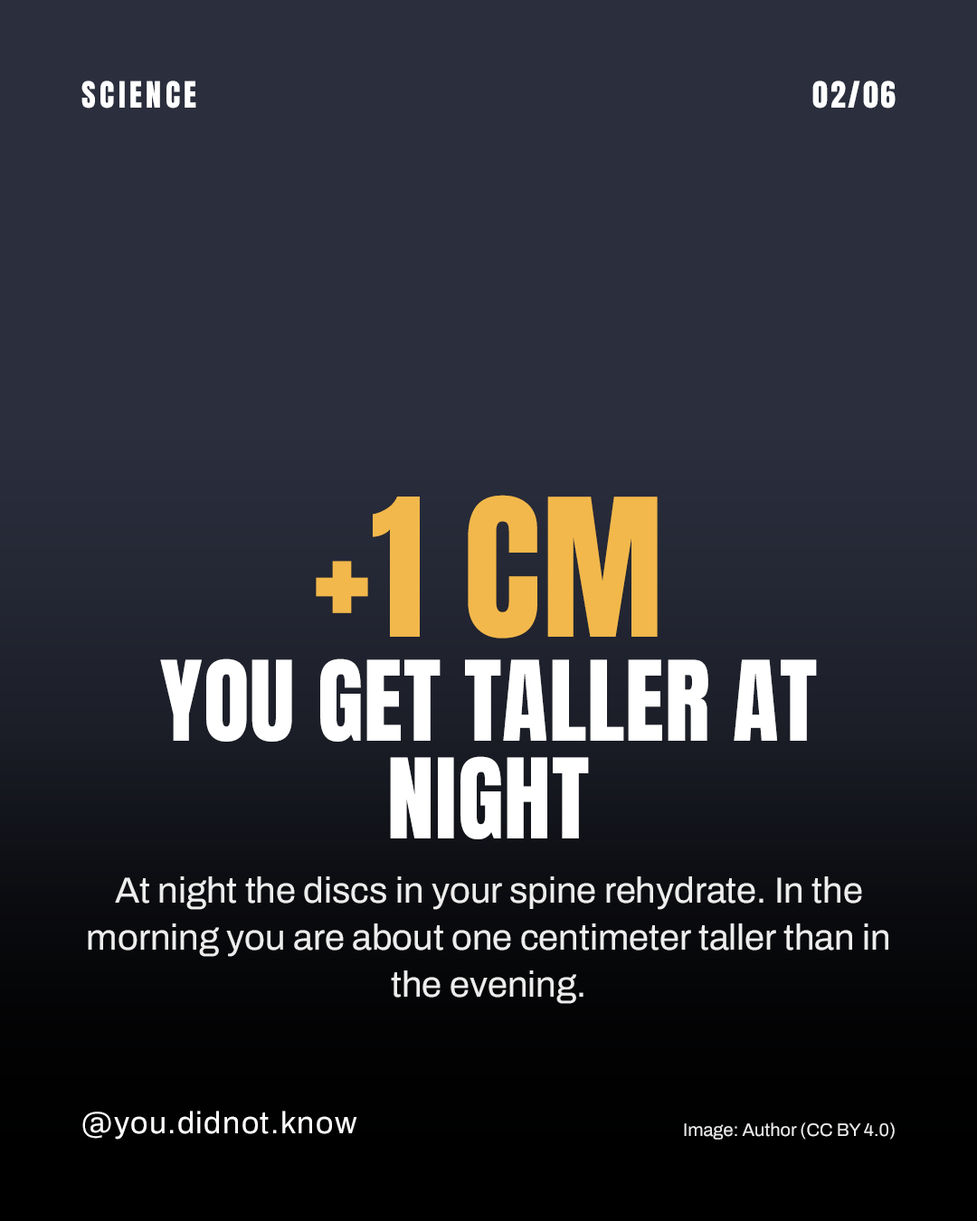
<style>
.page{position:relative;width:977px;height:1221px;background:#2a2e3d}
.page>*{position:absolute;margin:0}
.t1{font:30.7px "Anton-Regular";letter-spacing:0.12em;color:#ffffff;text-transform:uppercase}
.t2{font:30.7px "Anton-Regular";letter-spacing:0.08em;color:#ffffff}
.t3{font:162.8px "Anton-Regular";color:#f2b84b;text-transform:uppercase}
.t4{font:94.1px/97.7px "Anton-Regular";color:#ffffff;text-transform:uppercase}
.t5{font:36.2px/47px "Archivo-Regular";color:#ededed}
.t6{font:30.7px "Archivo-Regular";letter-spacing:0.04em;color:#ffffff}
.t7{font:18.1px "Archivo-Regular";color:#ededed}
</style>
<div class="page">
<p class="t1" style="left:81px;top:80px;width:115px;height:29px">SCIENCE</p>
<p class="t2" style="left:812px;top:80px;width:83px;height:29px">02/06</p>
<p class="t3" style="left:316px;top:495px;width:341px;height:143px">+1 CM</p>
<p class="t4" style="left:160px;top:658px;width:657px;height:181px;text-align:center">YOU GET TALLER AT NIGHT</p>
<p class="t5" style="left:88px;top:876px;width:800px;height:128px;text-align:center">At night the discs in your spine rehydrate. In the morning you are about one centimeter taller than in the evening.</p>
<p class="t6" style="left:82px;top:1111px;width:275px;height:28px">@you.didnot.know</p>
<p class="t7" style="left:684px;top:1122px;width:210px;height:17px">Image: Author (CC BY 4.0)</p>
</div>
